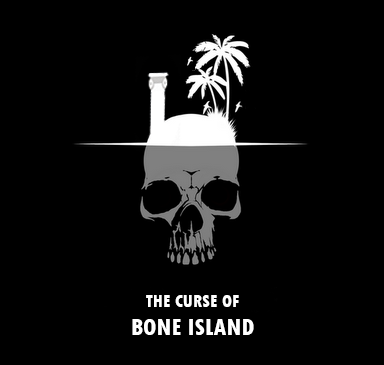
<style>
.page{position:relative;width:384px;height:365px;background:#000000}
.page>*{position:absolute;margin:0}
.t1{font:18px "TwCenMT-CondensedExtraBold";color:#ffffff}
.t2{font:24px "TwCenMT-CondensedExtraBold";color:#ffffff}
</style>
<div class="page">
<p class="t1" style="left:132px;top:295px;width:122px;height:40px;text-align:center">THE CURSE OF<br><span class="t2">BONE ISLAND</span></p>
</div>
